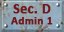
<style>
.page{position:relative;width:64px;height:32px}
.page>*{position:absolute;margin:0}
.t1{font:11px/11px "Calibri-Bold";letter-spacing:0.02em;color:#731818;font-weight:bold}
.t2{font:13.5px/11px "Calibri-Bold";letter-spacing:0.02em;color:#731818;font-weight:bold}
</style>
<div class="page">
<p class="t1" style="left:11px;top:4px;width:42px;height:21px;text-align:center"><span class="t2">Sec. D<br></span>Admin 1</p>
</div>
